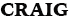
<style>
.page{position:relative;width:72px;height:19px;background:#ffffff}
.page>*{position:absolute;margin:0}
.t1{font:18px "IowanOldStyle-Black";color:#090808}
</style>
<div class="page">
<p class="t1" style="left:0px;top:3px;width:69px;height:13px">CRAIG</p>
</div>
